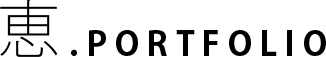
<style>
.page{position:relative;width:326px;height:57px;background:#ffffff}
.page>*{position:absolute;margin:0}
.t1{font:33.4px "KozGoPr6N-Bold";letter-spacing:0.24em;color:#000000}
.t2{font:62.9px "KozGoPr6N-ExtraLight";letter-spacing:0.1em;color:#000000}
</style>
<div class="page">
<p class="t1" style="left:0px;top:0px;width:326px;height:57px"><span class="t2">恵</span>.PORTFOLIO</p>
</div>
